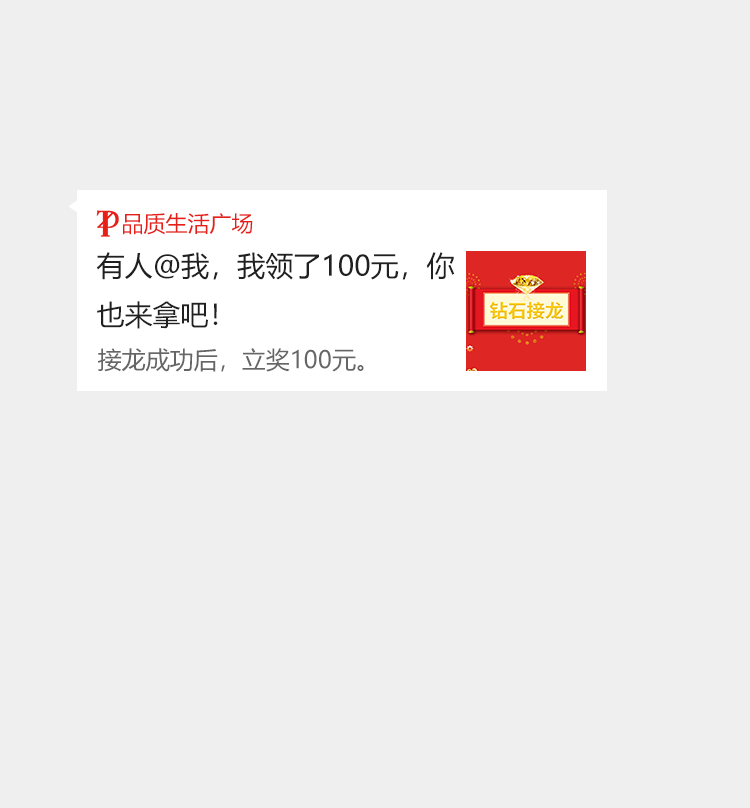
<style>
.page{position:relative;width:750px;height:808px;background:#f0efef}
.page>*{position:absolute;margin:0}
.t1{font:22px "MicrosoftYaHei";color:#e61f18;text-transform:uppercase}
.t2{font:28px "MicrosoftYaHei";color:#202020;text-transform:uppercase}
.t3{font:24px "MicrosoftYaHei";color:#666666;text-transform:uppercase}
</style>
<div class="page">
<p class="t1" style="left:123px;top:213px;width:130px;height:22px">品质生活广场</p>
<p class="t2" style="left:96px;top:252px;width:359px;height:77px">有人@我，我领了100元，你<br>也来拿吧！</p>
<p class="t3" style="left:98px;top:348px;width:266px;height:24px">接龙成功后，立奖100元。</p>
</div>
